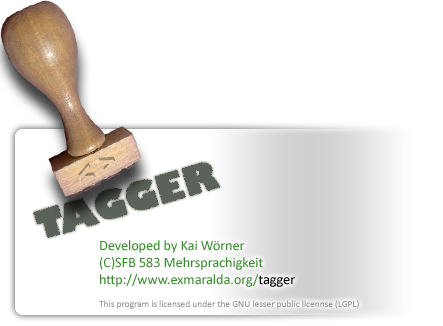
<style>
.page{position:relative;width:443px;height:326px;background:#ffffff}
.page>*{position:absolute;margin:0}
.t1{font:38.6px "GillSans-UltraBold";letter-spacing:-0.005em;color:#5b625a}
.t2{font:14.3px "Calibri";letter-spacing:-0.005em;color:#3b8b2f}
.t3{font:14.3px "Calibri";letter-spacing:-0.005em;color:#000000}
.t4{font:9.5px "Calibri";letter-spacing:-0.005em;color:#3b8b2f}
.t5{font:9.5px "Calibri";letter-spacing:-0.005em;color:#898989}
</style>
<div class="page">
<p class="t1" style="left:33px;top:162px;width:187px;height:76px;rotate:-17deg">TAGGER</p>
<p class="t2" style="left:99px;top:240px;width:260px;height:69px">Developed by Kai Wörner<br>(C)SFB 583 Mehrsprachigkeit<br>http://www.exmaralda.org/<span class="t3">tagger<br></span><span class="t4"><br></span><span class="t5">This program is licensed under the GNU lesser public licennse (LGPL)</span></p>
</div>
